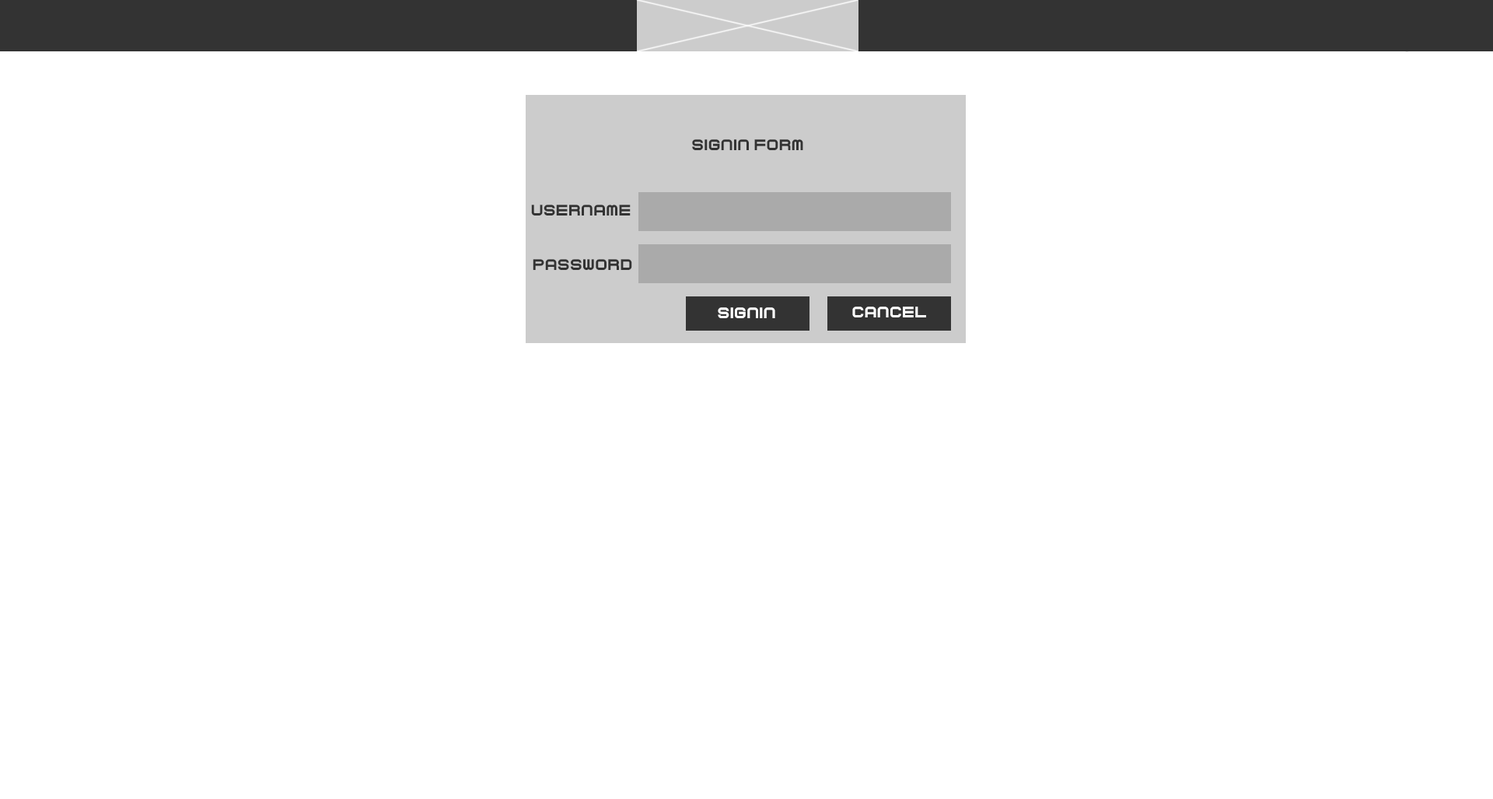
<style>
.page{position:relative;width:1493px;height:799px;background:#ffffff}
.page>*{position:absolute;margin:0}
.t1{font:15.6px "Curvert";color:#333333}
.t2{font:15.6px "Curvert";color:#ffffff}
</style>
<div class="page">
<p class="t1" style="left:692px;top:139px;width:111px;height:11px">SIGNIN FORM</p>
<p class="t1" style="left:531px;top:205px;width:100px;height:10px">USERNAME</p>
<p class="t1" style="left:533px;top:259px;width:99px;height:11px">PASSWORD</p>
<p class="t2" style="left:718px;top:307px;width:57px;height:11px">SIGNIN</p>
<p class="t2" style="left:852px;top:306px;width:74px;height:11px">CANCEL</p>
</div>
